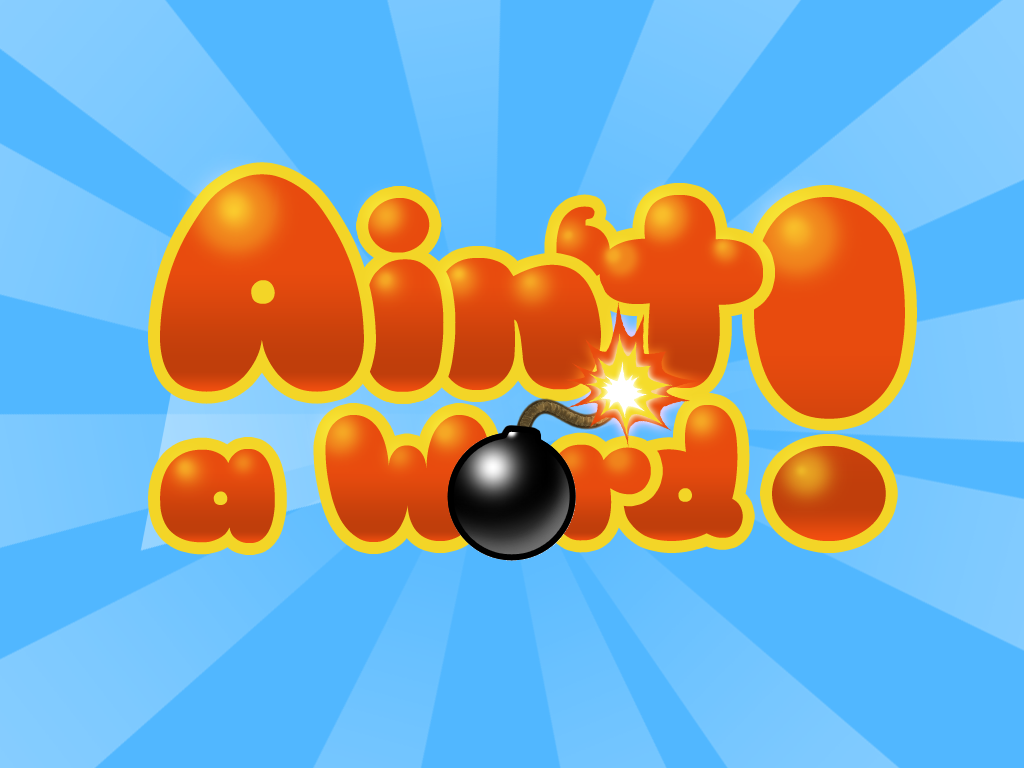
<style>
.page{position:relative;width:1024px;height:768px;background:#51b7ff}
.page>*{position:absolute;margin:0}
.t1{font:300px "Sniglet"}
.t2{font:250px "Sniglet";letter-spacing:-0.1em}
.t3{font:437.5px "Sniglet";letter-spacing:-0.1em}
.t4{font:175px "Sniglet";letter-spacing:-0.1em}
</style>
<div class="page">
<p class="t1" style="left:160px;top:174px;width:204px;height:218px">A</p>
<p class="t2" style="left:363px;top:198px;width:238px;height:194px">in</p>
<p class="t2" style="left:363px;top:198px;width:81px;height:194px">i</p>
<p class="t2" style="left:556px;top:195px;width:207px;height:193px">‘t</p>
<p class="t3" style="left:754px;top:197px;width:151px;height:344px">!</p>
<p class="t4" style="left:623px;top:405px;width:120px;height:136px">d</p>
<p class="t4" style="left:160px;top:415px;width:330px;height:128px">a W</p>
<p class="t4" style="left:552px;top:444px;width:99px;height:97px">r</p>
</div>
